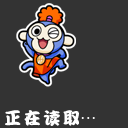
<style>
.page{position:relative;width:128px;height:128px;background:#333333}
.page>*{position:absolute;margin:0}
.t1{font:17px "DFPKanTingLiuW9";letter-spacing:0.15em;color:#ffffff}
</style>
<div class="page">
<p class="t1" style="left:5px;top:110px;width:74px;height:16px">正在读取</p>
</div>
